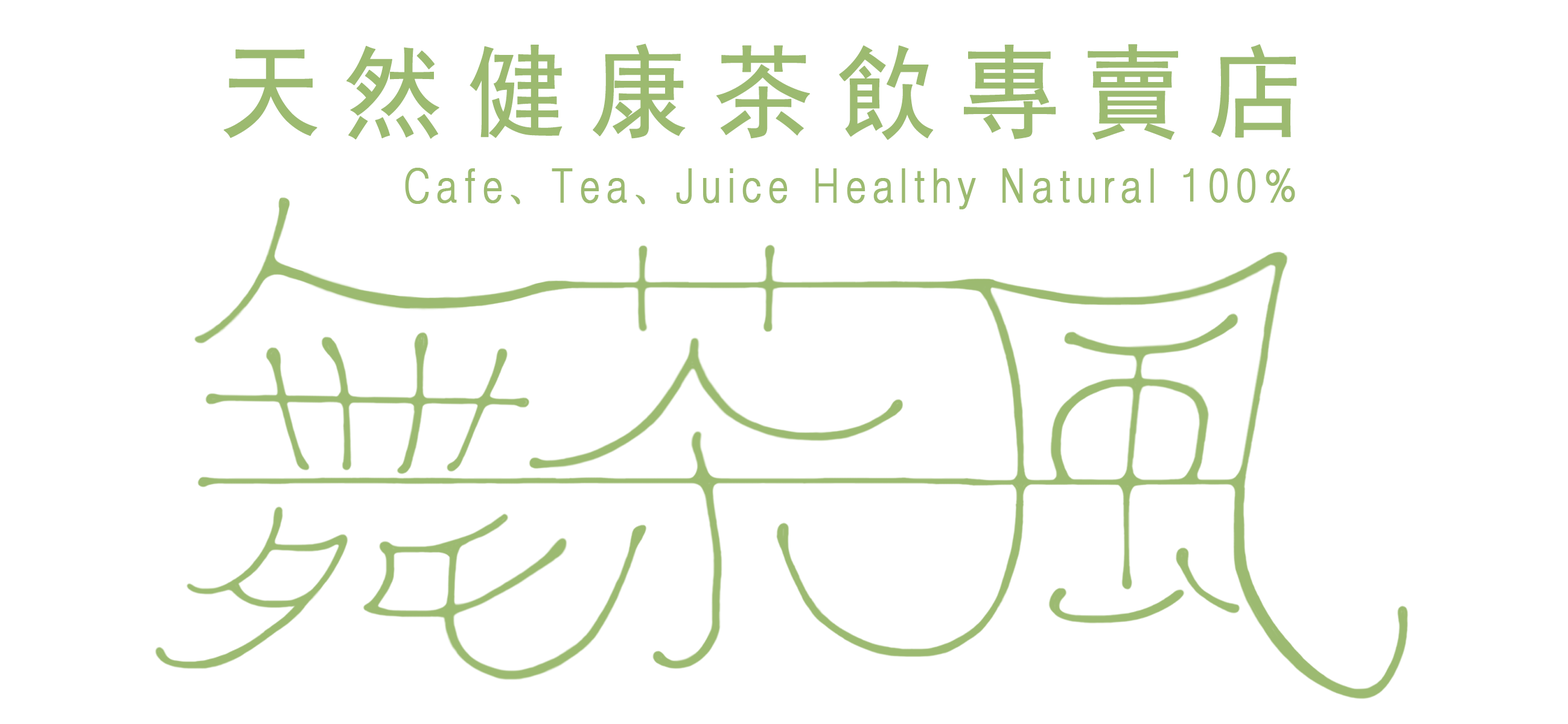
<style>
.page{position:relative;width:1568px;height:724px;background:#ffffff}
.page>*{position:absolute;margin:0}
.t1{font:102.1px "SimHei";letter-spacing:0.21em;color:#9cba70;font-weight:bold}
.t2{font:46.8px "Dotum";letter-spacing:0.12em;color:#9cba70;font-weight:bold;scale:0.81 1}
</style>
<div class="page">
<p class="t1" style="left:223px;top:43px;width:1074px;height:97px">天然健康茶飲專賣店</p>
<p class="t2" style="left:405px;top:168px;width:890px;height:41px">Cafe、Tea、Juice Healthy Natural 100%</p>
</div>
